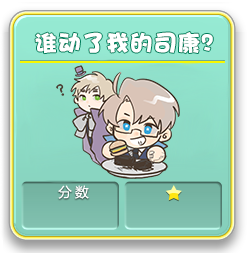
<style>
.page{position:relative;width:247px;height:253px}
.page>*{position:absolute;margin:0}
.t1{font:23px "DFPHaiBaoW12";letter-spacing:0.04em;color:#ffffff;text-transform:uppercase}
</style>
<div class="page">
<p class="t1" style="left:35px;top:32px;width:178px;height:22px">谁动了我的司康？</p>
</div>
